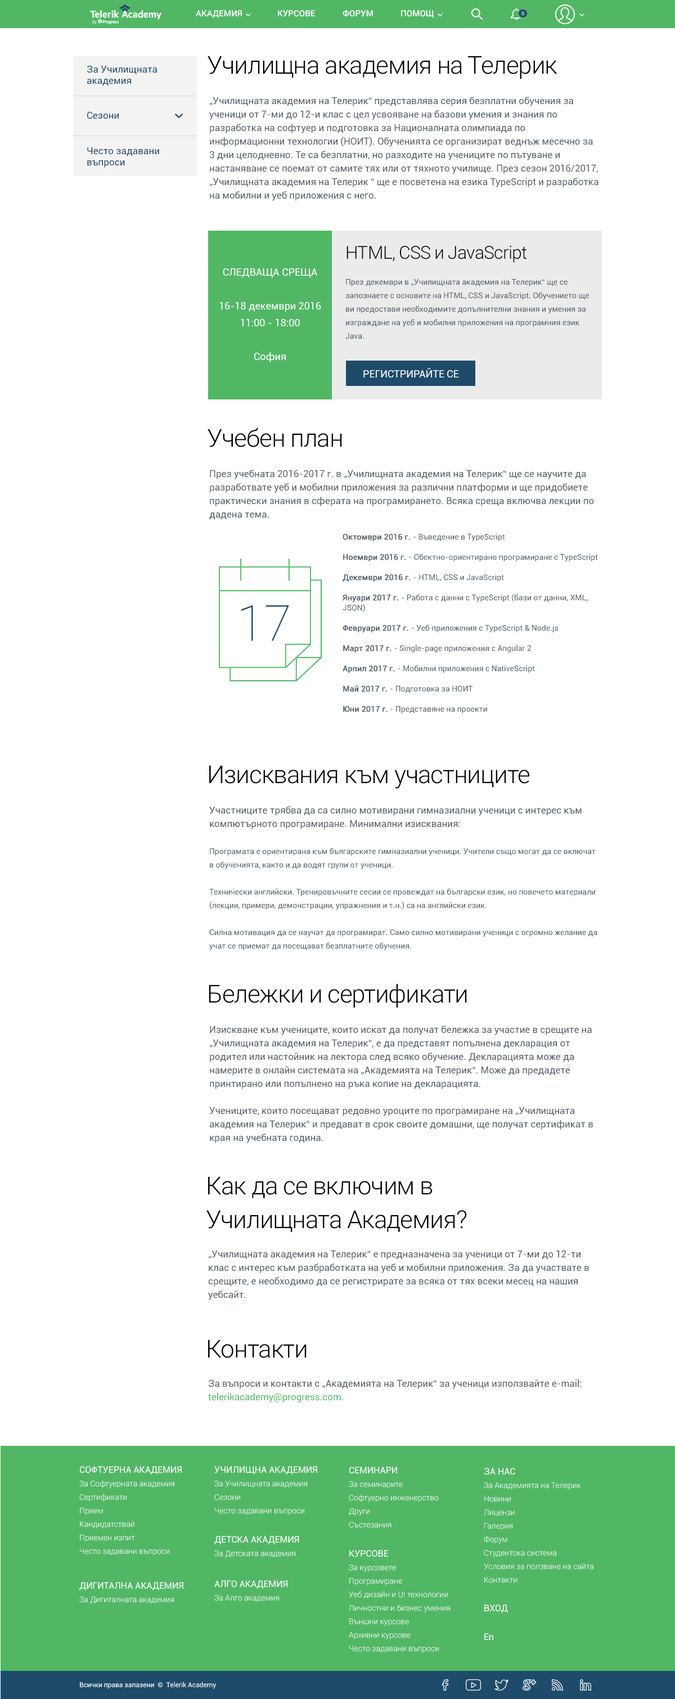
<style>
.page{position:relative;width:675px;height:1699px;background:#ffffff}
.page>*{position:absolute;margin:0}
.t1{font:8.4px "Roboto-Medium";letter-spacing:0.005em;color:#ffffff}
.t2{font:9.6px "Roboto-Regular";letter-spacing:0.005em;color:#1e4b6a}
.t3{font:24.8px "Roboto-Light";letter-spacing:-0.025em;color:#000000}
.t4{font:9.6px/13.5px "Roboto-Regular";color:#4f5d6c}
.t5{font:18px "Roboto-Light";letter-spacing:-0.025em;color:#000000}
.t6{font:10.1px/16.9px "Roboto-Regular";color:#ffffff}
.t7{font:7.9px/13.5px "Roboto-Regular";color:#4f5d6c}
.t8{font:10.1px "Roboto-Regular";color:#ffffff;text-transform:uppercase}
.t9{font:7.9px/10.1px "Roboto-Regular";color:#4f5d6c}
.t10{font:7.9px/10.1px "Roboto-Regular";color:#4f5d6c;font-weight:bold}
.t11{font:24.8px/33.8px "Roboto-Light";letter-spacing:-0.025em;color:#000000}
.t12{font:9.6px/13.5px "Roboto-Regular";color:#51b765}
.t13{font:7.9px/13.5px "Roboto-Light";color:#ffffff}
.t14{font:9px/13.5px "Roboto-Regular";color:#ffffff;text-transform:uppercase}
.t15{font:9px "Roboto-Regular";color:#ffffff;text-transform:uppercase}
.t16{font:9px "Roboto-Regular";color:#ffffff}
.t17{font:6.8px "Roboto-Regular";color:#ffffff}
</style>
<div class="page">
<p class="t1" style="left:196px;top:10px;width:46px;height:8px">АКАДЕМИЯ</p>
<p class="t1" style="left:278px;top:10px;width:37px;height:7px">КУРСОВЕ</p>
<p class="t1" style="left:343px;top:10px;width:30px;height:7px">ФОРУМ</p>
<p class="t1" style="left:401px;top:10px;width:33px;height:8px">ПОМОЩ</p>
<p class="t2" style="left:87px;top:65px;width:70px;height:21px">За Училищната <br>академия</p>
<p class="t3" style="left:208px;top:56px;width:349px;height:23px">Училищна академия на Телерик</p>
<p class="t4" style="left:209px;top:97px;width:389px;height:104px">„Училищната академия на Телерик“ представлява серия безплатни обучения за ученици от 7-ми до 12-и клас с цел усвояване на базови умения и знания по разработка на софтуер и подготовка за Националната олимпиада по информационни технологии (НОИТ). Обученията се организират веднъж месечно за 3 дни целодневно. Те са безплатни, но разходите на учениците по пътуване и настаняване се поемат от самите тях или от тяхното училище. През сезон 2016/2017, „Училищната академия на Телерик “ ще e посветена на езика TypeScript и разработка на мобилни и уеб приложения с него.</p>
<p class="t2" style="left:87px;top:111px;width:32px;height:8px">Сезони</p>
<p class="t2" style="left:87px;top:147px;width:72px;height:21px">Често задавани<br>въпроси</p>
<p class="t5" style="left:346px;top:245px;width:181px;height:18px">HTML, CSS и JavaScript</p>
<p class="t6" style="left:219px;top:268px;width:102px;height:94px;text-align:center">СЛЕДВАЩА СРЕЩА<br><br>16-18 декември 2016<br>11:00 - 18:00<br> <br>София</p>
<p class="t7" style="left:345px;top:279px;width:244px;height:60px">През декември в „Училищната академия на Телерик“ ще се запознаете с основите на HTML, CSS и JavaScript. Обучението ще ви предостави необходимите допълнителни знания и умения за изграждане на уеб и мобилни приложения на програмния език Java.</p>
<p class="t8" style="left:363px;top:368px;width:96px;height:9px">РЕГИСТРИРАЙТЕ СЕ</p>
<p class="t3" style="left:208px;top:428px;width:134px;height:19px">Учебен план</p>
<p class="t4" style="left:209px;top:470px;width:385px;height:49px">През учебната 2016-2017 г. в „Училищната академия на Телерик“ ще се научите да разработвате уеб и мобилни приложения за различни платформи и ще придобиете практически знания в сферата на програмирането. Всяка среща включва лекции по дадена тема.</p>
<p class="t9" style="left:343px;top:533px;width:255px;height:180px"><span class="t10">Октомври 2016 г. </span>- Въведение в TypeScript<br><br><span class="t10">Ноември 2016 г. </span>- Обектно-ориентирано програмиране с TypeScript<br><br><span class="t10">Декември 2016 г. </span>- HTML, CSS и JavaScript<br><br><span class="t10">Януари 2017 г. </span>- Работа с данни с TypeScript (бази от данни, XML, JSON)<br><br><span class="t10">Февруари 2017 г. </span>- Уеб приложения с TypeScript &amp; Node.js<br><br><span class="t10">Март 2017 г. </span>- Single-page приложения с Angular 2<br><br><span class="t10">Арпил 2017 г. </span>- Мобилни приложения с NativeScript<br><br><span class="t10">Май 2017 г. </span>- Подготовка за НОИТ<br><br><span class="t10">Юни 2017 г.</span> - Представяне на проекти</p>
<p class="t3" style="left:209px;top:765px;width:320px;height:24px">Изисквания към участниците</p>
<p class="t7" style="left:209px;top:806px;width:388px;height:144px"><span class="t4">Участниците трябва да са силно мотивирани гимназиални ученици с интерес към компютърното програмиране. Минимални изисквания:<br><br></span>Програмата е ориентирана към българските гимназиални ученици. Учители също могат да се включат в обученията, както и да водят групи от ученици.<br><br>Технически английски. Тренировъчните сесии се провеждат на български език, но повечето материали (лекции, примери, демонстрации, упражнения и т.н.) са на английски език.<br><br>Силна мотивация да се научат да програмират. Само силно мотивирани ученици с огромно желание да учат се приемат да посещават безплатните обучения.</p>
<p class="t3" style="left:209px;top:984px;width:258px;height:23px">Бележки и сертификати</p>
<p class="t4" style="left:209px;top:1025px;width:384px;height:118px">Изискване към учениците, които искат да получат бележка за участие в срещите на „Училищната академия на Телерик“, е да представят попълнена декларация от родител или настойник на лектора след всяко обучение. Декларацията може да намерите в онлайн системата на „Академията на Телерик“. Може да предадете принтирано или попълнено на ръка копие на декларацията.<br><br>Учениците, които посещават редовно уроците по програмиране на „Училищната академия на Телерик“ и предават в срок своите домашни, ще получат сертификат в края на учебната година.</p>
<p class="t11" style="left:206px;top:1176px;width:261px;height:56px">Как да се включим в <br>Училищната Академия?</p>
<p class="t4" style="left:208px;top:1250px;width:381px;height:50px">„Училищната академия на Телерик“ е предназначена за ученици от 7-ми до 12-ти клас с интерес към разбработката на уеб и мобилни приложения. За да участвате в срещите, е необходимо да се регистрирате за всяка от тях всеки месец на нашия уебсайт.</p>
<p class="t3" style="left:208px;top:1339px;width:99px;height:19px">Контакти</p>
<p class="t4" style="left:208px;top:1379px;width:374px;height:23px">За въпроси и контакти с „Академията на Телерик“ за ученици използвайте e-mail: <span class="t12">telerikacademy@progress.com.</span></p>
<p class="t13" style="left:79px;top:1466px;width:103px;height:89px"><span class="t14">Софтуерна Академия<br></span>За Софтуерната академия<br>Сертификати<br>Прием<br>Кандидатствай<br>Приемен изпит<br>Често задавани въпроси</p>
<p class="t13" style="left:214px;top:1466px;width:103px;height:49px"><span class="t14">Училищна Академия<br></span>За Училищната академия<br>Сезони<br>Често задавани въпроси</p>
<p class="t13" style="left:349px;top:1466px;width:90px;height:62px"><span class="t14">Семинари<br></span>За семинарите<br>Софтуерно инженерство<br>Други<br>Състезания</p>
<p class="t13" style="left:484px;top:1468px;width:109px;height:115px"><span class="t14">За нас<br></span>За Академията на Телерик<br>Новини<br>Лицензи<br>Галерия<br>Форум<br>Студентска система<br>Условия за ползване на сайта<br>Контакти</p>
<p class="t13" style="left:214px;top:1536px;width:85px;height:22px"><span class="t14">Детска Академия<br></span>За Детската академия</p>
<p class="t13" style="left:349px;top:1550px;width:101px;height:103px"><span class="t14">Kурсове<br></span>За курсовете<br>Програмиране<br>Уеб дизайн и UI технологии<br>Личностни и бизнес умения<br>Външни курсове<br>Архивни курсове<br>Често задавани въпроси</p>
<p class="t13" style="left:79px;top:1582px;width:104px;height:22px"><span class="t14">Дигитална Академия<br></span>За Дигиталната академия</p>
<p class="t13" style="left:214px;top:1580px;width:73px;height:22px"><span class="t14">Алго Академия<br></span>За Алго академия</p>
<p class="t15" style="left:484px;top:1604px;width:24px;height:9px">Вход</p>
<p class="t16" style="left:484px;top:1633px;width:9px;height:7px">En</p>
<p class="t17" style="left:80px;top:1681px;width:136px;height:8px">Всички права запазени  ©  Telerik Academy</p>
</div>
